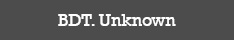
<style>
.page{position:relative;width:234px;height:40px;background:#4c4c4c}
.page>*{position:absolute;margin:0}
.t1{font:18px "Rockwell";color:#ffffff}
</style>
<div class="page">
<p class="t1" style="left:58px;top:14px;width:118px;height:12px">BDT. Unknown</p>
</div>
